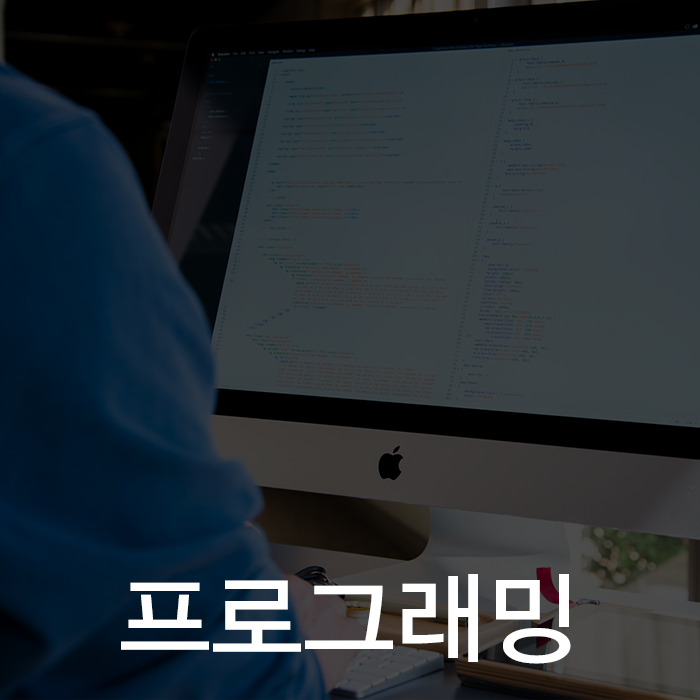
<style>
.page{position:relative;width:700px;height:700px}
.page>*{position:absolute;margin:0}
.t1{font:100px "YDIYGO330";color:#ffffff}
</style>
<div class="page">
<p class="t1" style="left:121px;top:574px;width:450px;height:90px">프로그래밍</p>
</div>
